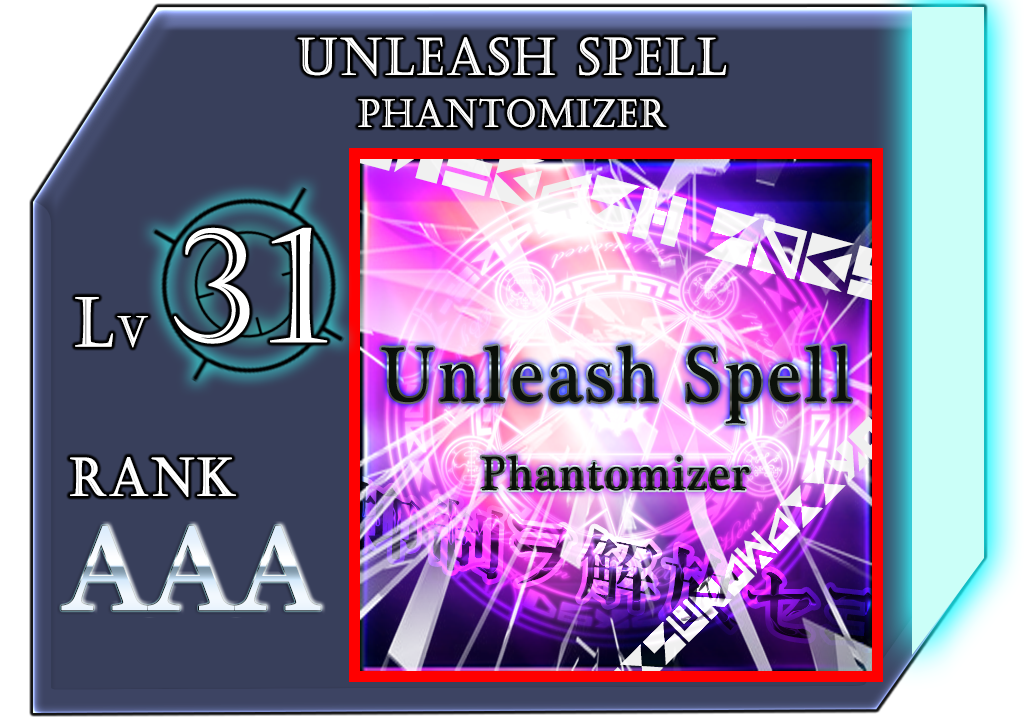
<style>
.page{position:relative;width:1024px;height:720px;background:#383f5b}
.page>*{position:absolute;margin:0}
.t1{font:50.8px "Castellar";letter-spacing:0.05em;color:#ffffff;font-weight:bold;scale:0.9 1}
.t2{font:37.8px "Castellar";letter-spacing:0.05em;color:#ffffff;font-weight:bold;scale:0.9 1}
.t3{font:67.8px "Castellar";letter-spacing:0.05em;color:#ffffff;font-weight:bold;scale:0.9 1}
.t4{font:41.5px "Castellar";letter-spacing:0.05em;color:#ffffff;font-weight:bold;scale:0.9 1}
.t5{font:52.2px "Castellar";letter-spacing:0.05em;color:#ffffff;font-weight:bold;scale:0.9 1}
</style>
<div class="page">
<p class="t1" style="left:297px;top:37px;width:429px;height:39px">Unleash SpelL</p>
<p class="t2" style="left:358px;top:98px;width:309px;height:30px">Phantomizer</p>
<p class="t3" style="left:75px;top:297px;width:73px;height:51px">L<span class="t4">v</span></p>
<p class="t5" style="left:70px;top:457px;width:166px;height:40px">RANK</p>
</div>
